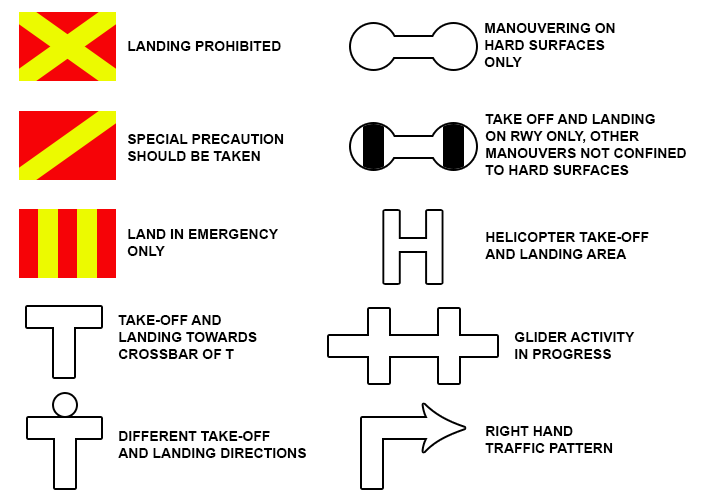
<style>
.page{position:relative;width:720px;height:500px;background:#ffffff}
.page>*{position:absolute;margin:0}
.t1{font:14px "Arial-BoldMT";color:#000000}
</style>
<div class="page">
<p class="t1" style="left:484px;top:23px;width:131px;height:44px">MANOUVERING ON<br>HARD SURFACES<br>ONLY</p>
<p class="t1" style="left:128px;top:41px;width:153px;height:10px">LANDING PROHIBITED</p>
<p class="t1" style="left:485px;top:114px;width:201px;height:61px">TAKE OFF AND LANDING<br>ON RWY ONLY, OTHER <br>MANOUVERS NOT CONFINED <br>TO HARD SURFACES</p>
<p class="t1" style="left:128px;top:134px;width:156px;height:27px">SPECIAL PRECAUTION<br>SHOULD BE TAKEN</p>
<p class="t1" style="left:127px;top:229px;width:151px;height:27px">LAND IN EMERGENCY <br>ONLY</p>
<p class="t1" style="left:485px;top:232px;width:164px;height:27px">HELICOPTER TAKE-OFF<br>AND LANDING AREA</p>
<p class="t1" style="left:118px;top:315px;width:139px;height:44px">TAKE-OFF AND <br>LANDING TOWARDS<br>CROSSBAR OF T</p>
<p class="t1" style="left:514px;top:332px;width:121px;height:27px">GLIDER ACTIVITY <br>IN PROGRESS</p>
<p class="t1" style="left:118px;top:431px;width:188px;height:27px">DIFFERENT TAKE-OFF <br>AND LANDING DIRECTIONS</p>
<p class="t1" style="left:485px;top:426px;width:128px;height:27px">RIGHT HAND<br>TRAFFIC PATTERN</p>
</div>
